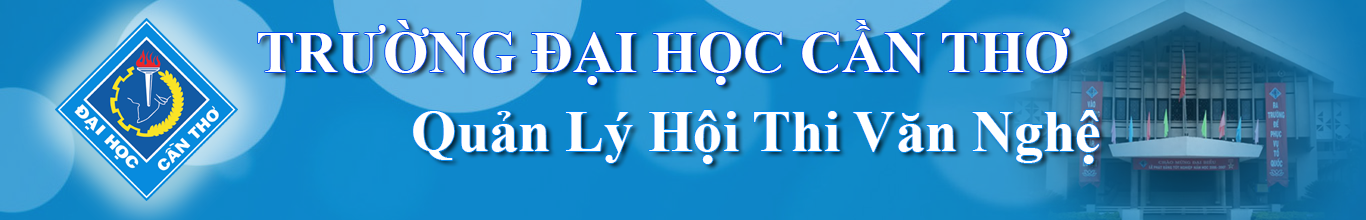
<style>
.page{position:relative;width:1366px;height:220px}
.page>*{position:absolute;margin:0}
.t1{font:58.3px "TimesNewRomanPS-BoldMT";color:#ffffff}
</style>
<div class="page">
<p class="t1" style="left:258px;top:20px;width:812px;height:65px">TRƯỜNG ĐẠI HỌC CẦN THƠ</p>
<p class="t1" style="left:413px;top:110px;width:687px;height:54px">Quản Lý Hội Thi Văn Nghệ</p>
</div>
